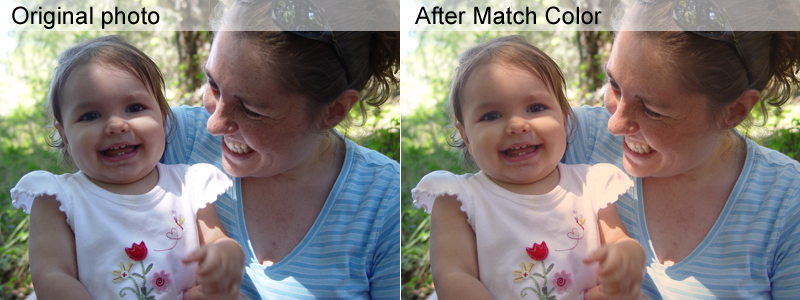
<style>
.page{position:relative;width:800px;height:300px}
.page>*{position:absolute;margin:0}
.t1{font:24px "ArialMT";color:#000000}
</style>
<div class="page">
<p class="t1" style="left:12px;top:6px;width:148px;height:23px">Original photo</p>
<p class="t1" style="left:415px;top:6px;width:187px;height:19px">After Match Color</p>
</div>
